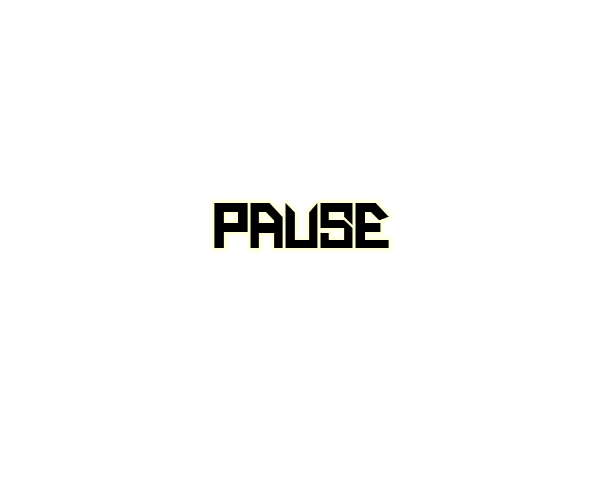
<style>
.page{position:relative;width:600px;height:500px;background:#ffffff}
.page>*{position:absolute;margin:0}
.t1{font:60px "Vador-Black";color:#000000}
</style>
<div class="page">
<p class="t1" style="left:214px;top:203px;width:175px;height:45px">PAUSE</p>
</div>
